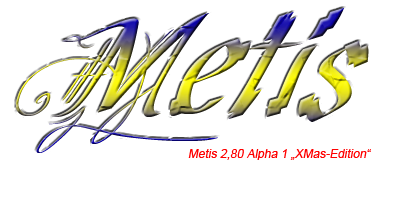
<style>
.page{position:relative;width:400px;height:200px;background:#ffffff}
.page>*{position:absolute;margin:0}
.t1{font:150px "Cretino";font-style:italic}
.t2{font:12px "ArialMT";color:#ff0000;font-style:italic}
</style>
<div class="page">
<p class="t1" style="left:16px;top:8px;width:353px;height:145px">Metis</p>
<p class="t2" style="left:188px;top:149px;width:183px;height:11px">Metis 2,80 Alpha 1 „XMas-Edition“</p>
</div>
